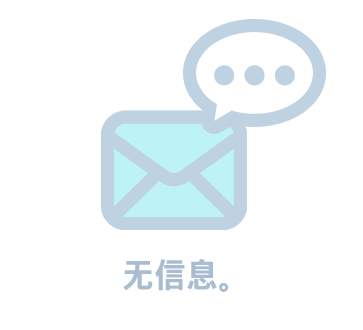
<style>
.page{position:relative;width:363px;height:330px;background:#ffffff}
.page>*{position:absolute;margin:0}
.t1{font:34.3px "NanumGothicExtraBold";color:#a9bdd0}
</style>
<div class="page">
<p class="t1" style="left:123px;top:259px;width:106px;height:33px">无信息。</p>
</div>
